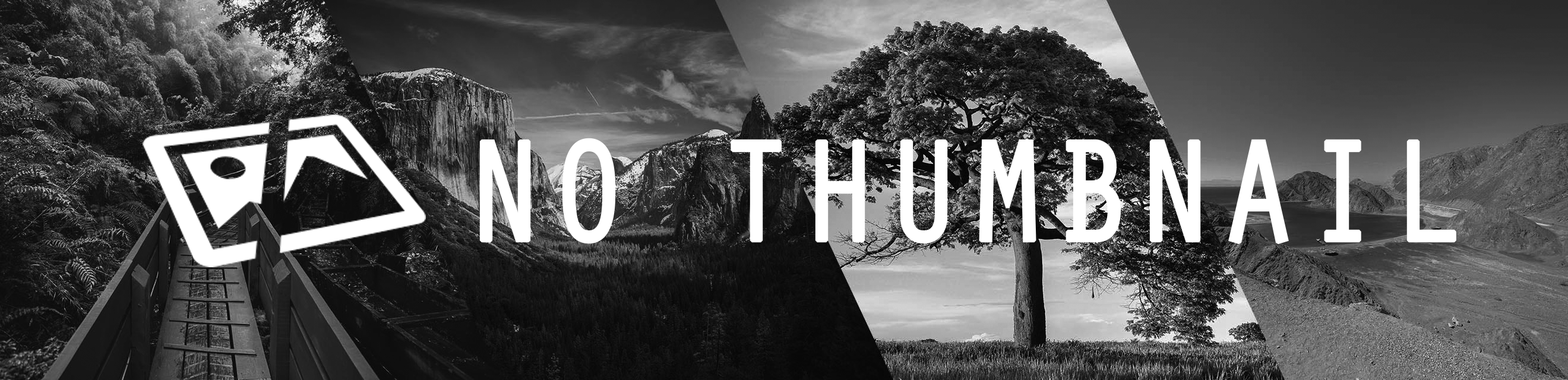
<style>
.page{position:relative;width:1568px;height:380px}
.page>*{position:absolute;margin:0}
.t1{font:148.5px "OratorStd";color:#ffffff;font-weight:bold;scale:0.9 1}
</style>
<div class="page">
<p class="t1" style="left:479px;top:138px;width:977px;height:107px">NO THUMBNAIL</p>
</div>
